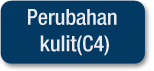
<style>
.page{position:relative;width:154px;height:71px;background:#033a64}
.page>*{position:absolute;margin:0}
.t1{font:22px "HelveticaNeueLTStd-MdCn";color:#ebebef}
</style>
<div class="page">
<p class="t1" style="left:28px;top:9px;width:89px;height:47px;text-align:center">Perubahan <br>kulit(C4)</p>
</div>
